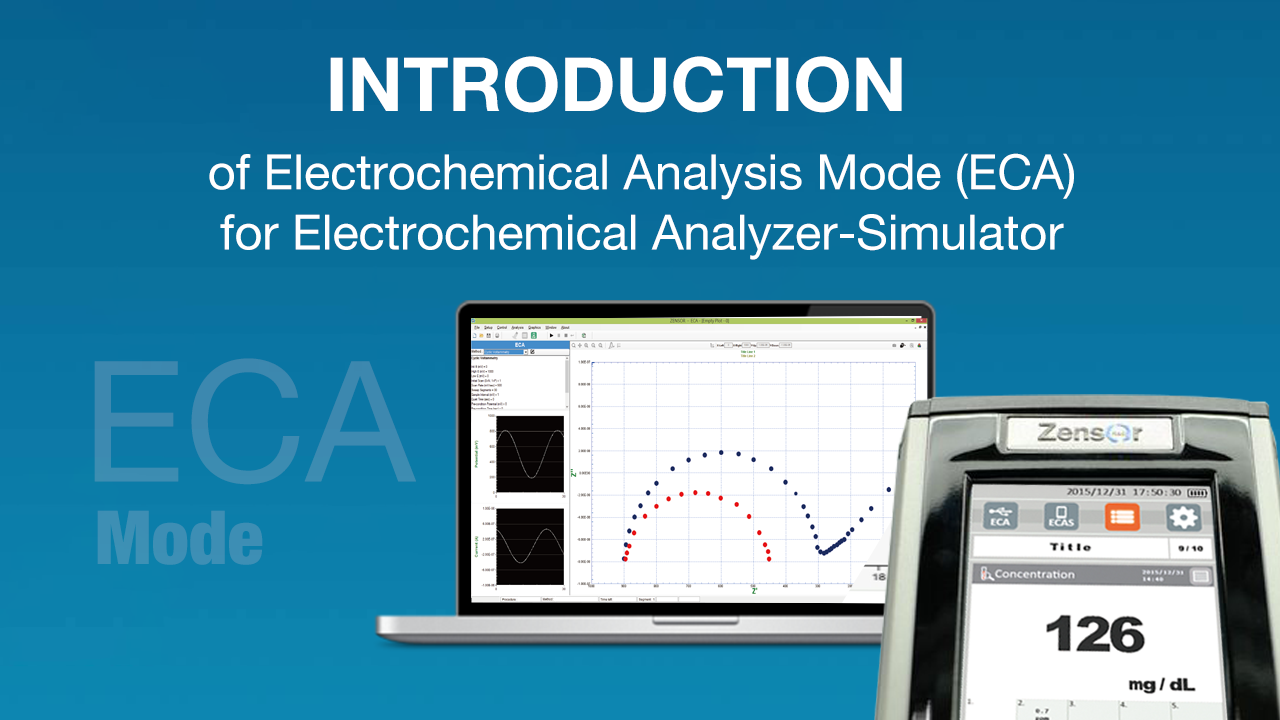
<style>
.page{position:relative;width:1280px;height:720px}
.page>*{position:absolute;margin:0}
.t1{font:74.5px "HelveticaNeue-Bold";color:#ffffff}
.t2{font:48.6px "HelveticaNeue";color:#ffffff}
.t3{font:168px "HelveticaNeue";color:#3d88af}
.t4{font:74.5px "HelveticaNeue-CondensedBlack";color:#3d8fb4}
</style>
<div class="page">
<p class="t1" style="left:330px;top:56px;width:572px;height:57px">INTRODUCTION</p>
<p class="t2" style="left:209px;top:153px;width:865px;height:47px">of Electrochemical Analysis Mode (ECA)</p>
<p class="t2" style="left:220px;top:214px;width:844px;height:46px">for Electrochemical Analyzer-Simulator</p>
<p class="t3" style="left:94px;top:358px;width:322px;height:127px">ECA</p>
<p class="t4" style="left:97px;top:510px;width:166px;height:55px">Mode</p>
</div>
